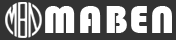
<style>
.page{position:relative;width:176px;height:40px;background:#333333}
.page>*{position:absolute;margin:0}
.t1{font:41.1px "Bauhaus93";letter-spacing:0.035em;color:#ffffff}
</style>
<div class="page">
<p class="t1" style="left:45px;top:6px;width:127px;height:27px">MABEN</p>
</div>
